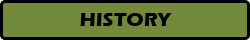
<style>
.page{position:relative;width:250px;height:40px;background:#738a3c}
.page>*{position:absolute;margin:0}
.t1{font:20px "ErasITC-Bold";color:#000000}
</style>
<div class="page">
<p class="t1" style="left:80px;top:13px;width:92px;height:13px">HISTORY</p>
</div>
